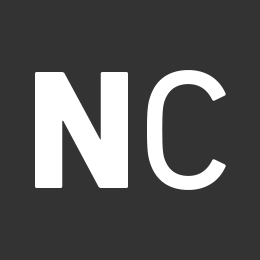
<style>
.page{position:relative;width:260px;height:260px;background:#333333}
.page>*{position:absolute;margin:0}
.t1{font:170px "DINNextLTPro-Heavy";color:#ffffff}
.t2{font:170px "DINNextLTPro-Regular";color:#ffffff}
</style>
<div class="page">
<p class="t1" style="left:35px;top:70px;width:191px;height:120px">N<span class="t2">C</span></p>
</div>
